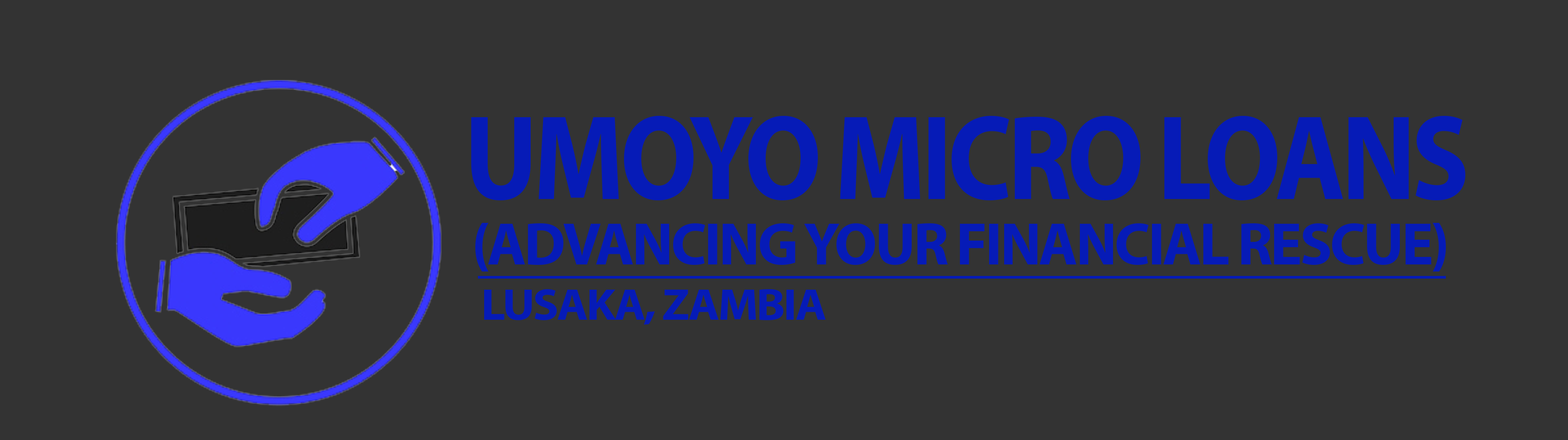
<style>
.page{position:relative;width:1568px;height:440px;background:#333333}
.page>*{position:absolute;margin:0}
.t1{font:121.3px "MyriadPro-Bold";letter-spacing:-0.039em;color:#061bb7;scale:0.89 1}
.t2{font:60.3px "MyriadPro-Bold";letter-spacing:-0.039em;color:#061bb7}
.t3{font:44.7px "MyriadPro-Bold";letter-spacing:-0.039em;color:#061bb7;scale:1.07 1}
</style>
<div class="page">
<p class="t1" style="left:471px;top:116px;width:994px;height:85px">UMOYO MICRO LOANS</p>
<p class="t2" style="left:475px;top:223px;width:971px;height:49px">(ADVANCING YOUR FINANCIAL RESCUE)</p>
<p class="t3" style="left:484px;top:289px;width:342px;height:36px">LUSAKA, ZAMBIA</p>
</div>
